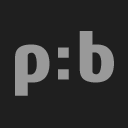
<style>
.page{position:relative;width:128px;height:128px;background:#1f1f1f}
.page>*{position:absolute;margin:0}
.t1{font:74px "MavenProBlack";color:#999999}
</style>
<div class="page">
<p class="t1" style="left:15px;top:31px;width:99px;height:65px">p:b</p>
</div>
